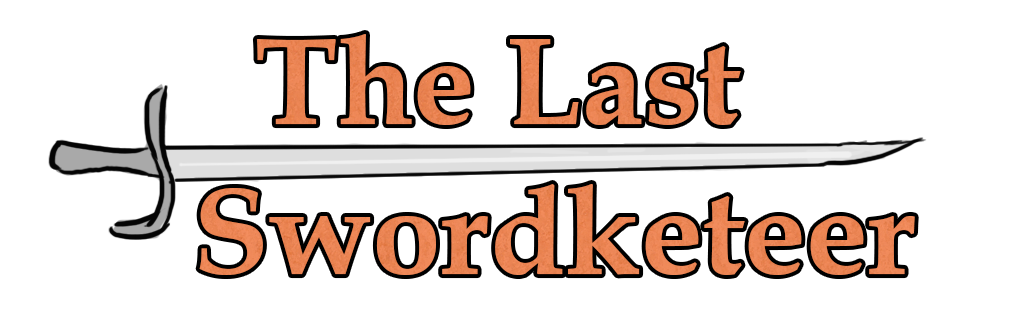
<style>
.page{position:relative;width:1024px;height:332px;background:#ffffff}
.page>*{position:absolute;margin:0}
.t1{font:124px/150px "BookAntiqua-Bold";color:#eb8453}
.t2{font:124px/70px "BookAntiqua-Bold";color:#eb8453}
</style>
<div class="page">
<p class="t1" style="left:199px;top:34px;width:716px;height:241px"><span class="t2">  The Last<br></span>Swordketeer</p>
</div>
